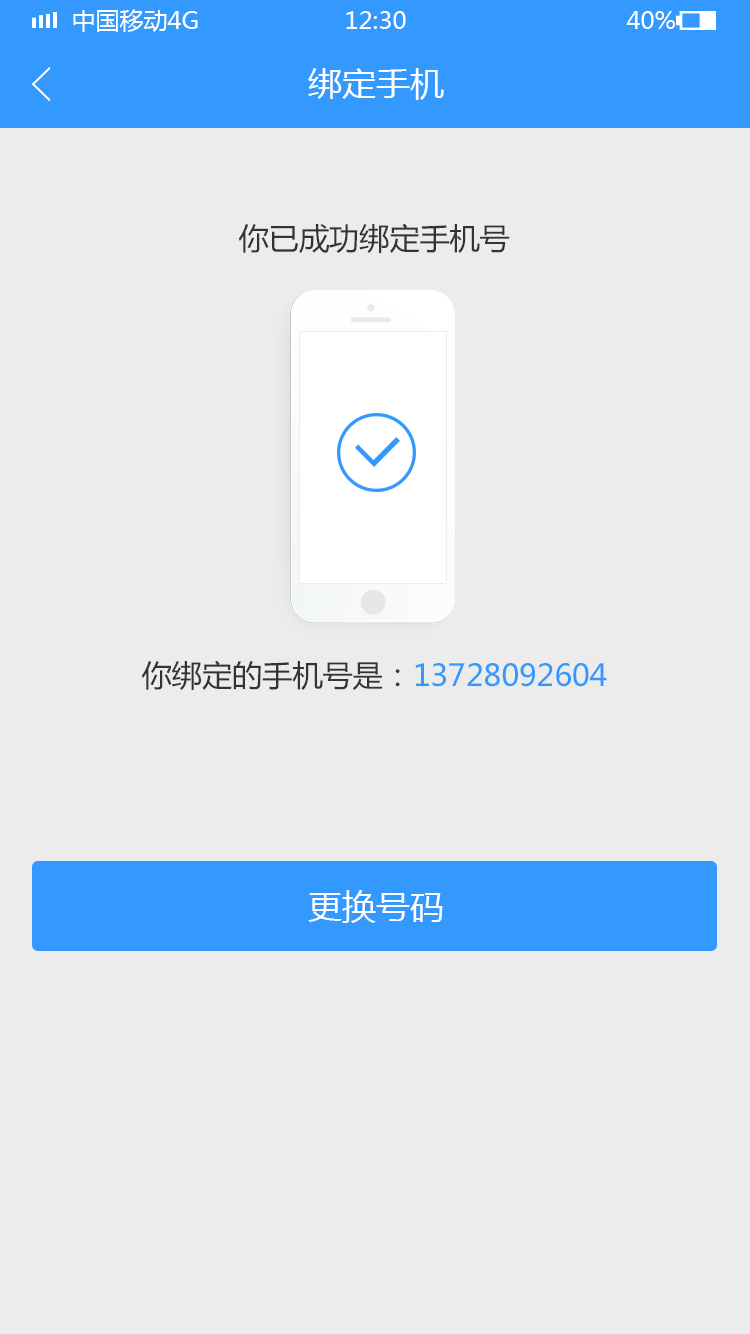
<style>
.page{position:relative;width:750px;height:1334px;background:#ececec}
.page>*{position:absolute;margin:0}
.t1{font:24px "MicrosoftYaHei";color:#ffffff;text-transform:uppercase}
.t2{font:34px "MicrosoftYaHei";color:#ffffff}
.t3{font:30px "MicrosoftYaHei";color:#333333}
.t4{font:30px "MicrosoftYaHei";color:#3399ff}
</style>
<div class="page">
<p class="t1" style="left:73px;top:9px;width:125px;height:23px">中国移动4G</p>
<p class="t1" style="left:346px;top:11px;width:60px;height:18px">12:30</p>
<p class="t1" style="left:626px;top:11px;width:49px;height:18px">40%</p>
<p class="t2" style="left:308px;top:68px;width:136px;height:32px">绑定手机</p>
<p class="t3" style="left:238px;top:223px;width:272px;height:30px">你已成功绑定手机号</p>
<p class="t4" style="left:141px;top:660px;width:466px;height:30px"><span class="t3">你绑定的手机号是：</span>13728092604</p>
<p class="t2" style="left:308px;top:890px;width:135px;height:33px">更换号码</p>
</div>
